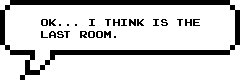
<style>
.page{position:relative;width:240px;height:80px;background:#ffffff}
.page>*{position:absolute;margin:0}
.t1{font:10px "JoystixMonospace-Regular";color:#000000}
</style>
<div class="page">
<p class="t1" style="left:41px;top:19px;width:159px;height:19px">ok... i think is the<br>last room.</p>
</div>
